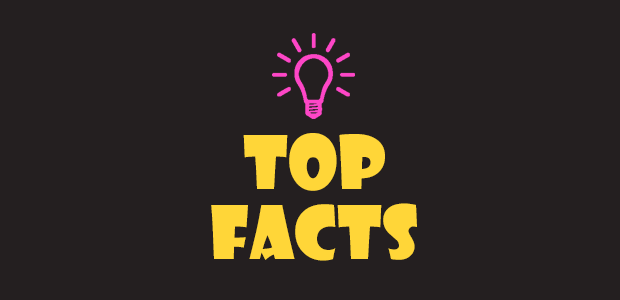
<style>
.page{position:relative;width:620px;height:300px;background:#241f20}
.page>*{position:absolute;margin:0}
.t1{font:72px "ShowcardGothic-Reg";color:#ffd638}
</style>
<div class="page">
<p class="t1" style="left:243px;top:133px;width:142px;height:58px">TOP</p>
<p class="t1" style="left:211px;top:203px;width:206px;height:58px">FACTS</p>
</div>
